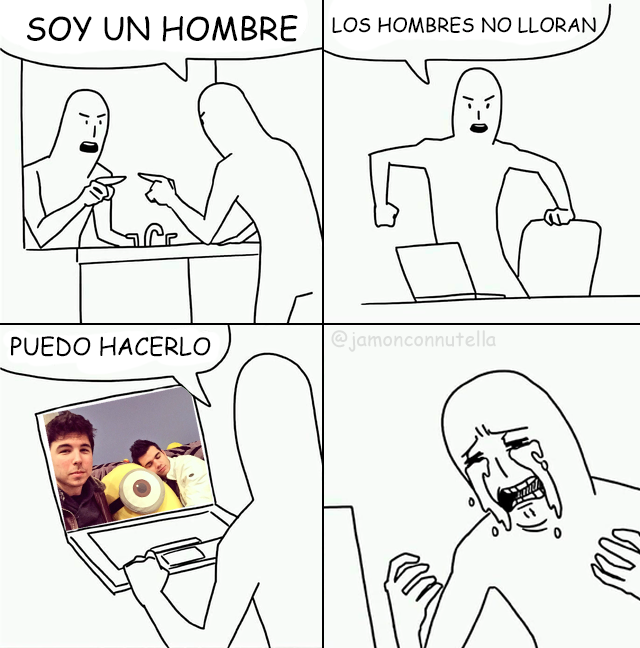
<style>
.page{position:relative;width:640px;height:648px;background:#f8fbf8}
.page>*{position:absolute;margin:0}
.t1{font:31.9px "ComicSansMS";color:#000000}
.t2{font:19.5px "ComicSansMS";color:#000000}
.t3{font:24px "ComicSansMS";color:#000000}
.t4{font:19.8px "ComicSansMS";color:#dcdedc}
</style>
<div class="page">
<p class="t1" style="left:27px;top:15px;width:271px;height:27px">SOY UN HOMBRE</p>
<p class="t2" style="left:332px;top:16px;width:264px;height:17px">LOS HOMBRES NO LLORAN</p>
<p class="t3" style="left:11px;top:336px;width:200px;height:21px">PUEDO HACERLO</p>
<p class="t4" style="left:331px;top:330px;width:165px;height:22px">@jamonconnutella</p>
</div>
